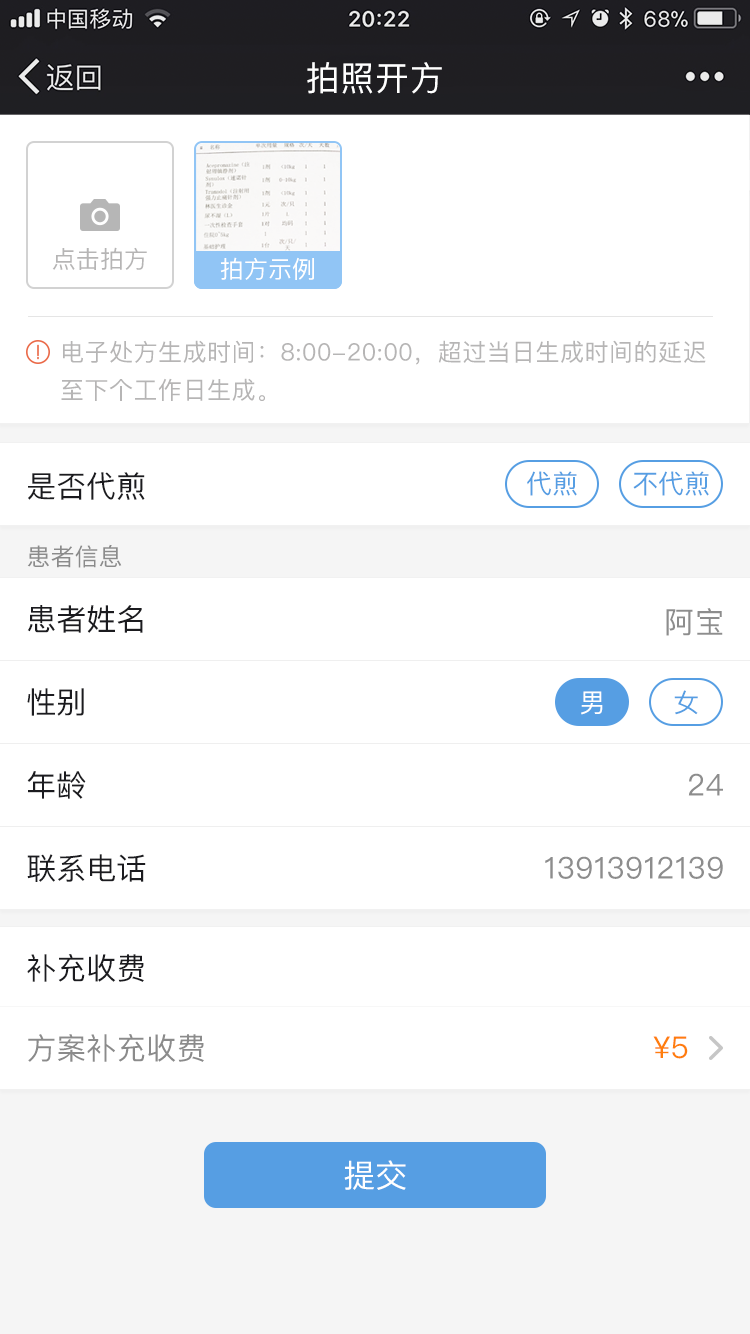
<style>
.page{position:relative;width:750px;height:1334px;background:#ffffff}
.page>*{position:absolute;margin:0}
.t1{font:34px "PingFangSC-Regular";letter-spacing:0.02em;color:#ffffff}
.t2{font:24px "PingFangSC-Regular";color:#b6b5b5}
.t3{font:24px "PingFangSC-Regular";color:#ffffff}
.t4{font:24px/38px "PingFangSC-Regular";letter-spacing:0.02em;color:#b6b5b5}
.t5{font:30px "PingFangSC-Regular";color:#1b1b1f}
.t6{font:26px "PingFangSC-Regular";color:#569ee3}
.t7{font:24px "SourceHanSansCN-Regular";color:#8b8b8b}
.t8{font:30px "PingFangSC-Regular";letter-spacing:0.02em;color:#8d8d8d}
.t9{font:26px "PingFangSC-Regular";color:#ffffff}
.t10{font:30px "PingFangSC-Regular";color:#8b8b8b}
.t11{font:30px "PingFangSC-Regular";color:#ff7e0c}
.t12{font:32px "PingFangSC-Regular";color:#ffffff}
</style>
<div class="page">
<p class="t1" style="left:307px;top:62px;width:135px;height:32px">拍照开方</p>
<p class="t2" style="left:52px;top:247px;width:95px;height:23px">点击拍方</p>
<p class="t3" style="left:220px;top:257px;width:94px;height:23px">拍方示例</p>
<p class="t4" style="left:61px;top:340px;width:645px;height:61px">电子处方生成时间：8:00-20:00，超过当日生成时间的延迟<br>至下个工作日生成。</p>
<p class="t5" style="left:28px;top:472px;width:117px;height:28px">是否代煎</p>
<p class="t6" style="left:527px;top:471px;width:50px;height:25px">代煎</p>
<p class="t6" style="left:633px;top:471px;width:76px;height:25px">不代煎</p>
<p class="t7" style="left:27px;top:544px;width:95px;height:24px">患者信息</p>
<p class="t5" style="left:27px;top:605px;width:116px;height:28px">患者姓名</p>
<p class="t8" style="left:666px;top:608px;width:57px;height:28px">阿宝</p>
<p class="t5" style="left:27px;top:688px;width:57px;height:28px">性别</p>
<p class="t9" style="left:581px;top:691px;width:22px;height:24px">男</p>
<p class="t6" style="left:674px;top:690px;width:24px;height:25px">女</p>
<p class="t5" style="left:27px;top:771px;width:59px;height:28px">年龄</p>
<p class="t8" style="left:688px;top:773px;width:35px;height:23px">24</p>
<p class="t5" style="left:27px;top:854px;width:119px;height:28px">联系电话</p>
<p class="t8" style="left:545px;top:856px;width:178px;height:23px">13913912139</p>
<p class="t5" style="left:27px;top:954px;width:117px;height:28px">补充收费</p>
<p class="t10" style="left:28px;top:1034px;width:176px;height:28px">方案补充收费</p>
<p class="t11" style="left:653px;top:1036px;width:35px;height:23px">¥5</p>
<p class="t12" style="left:344px;top:1160px;width:62px;height:30px">提交</p>
</div>
